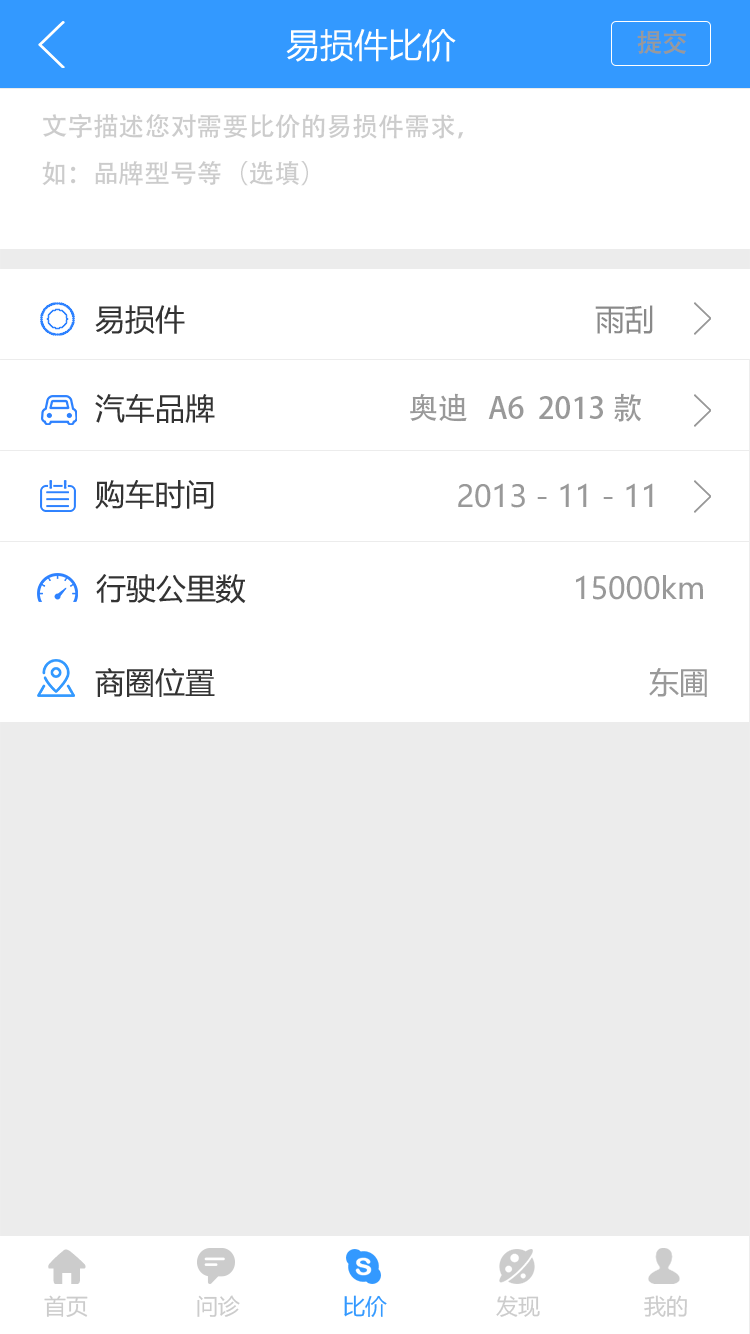
<style>
.page{position:relative;width:750px;height:1334px;background:#ffffff}
.page>*{position:absolute;margin:0}
.t1{font:34px "MicrosoftYaHei";color:#ffffff}
.t2{font:26px "AdobeHeitiStd-Regular";letter-spacing:-0.04em;color:#999999}
.t3{font:26px/47px "AdobeHeitiStd-Regular";color:#cccccc}
.t4{font:30px "MicrosoftYaHei";color:#333333}
.t5{font:30px "MicrosoftYaHei";color:#898989}
.t6{font:30px "AdobeHeitiStd-Regular";color:#999999}
.t7{font:30px "MicrosoftYaHei";color:#999999}
.t8{font:22px "MicrosoftYaHei";color:#cccccc}
.t9{font:22px "MicrosoftYaHei";color:#3399ff}
</style>
<div class="page">
<p class="t1" style="left:286px;top:28px;width:170px;height:34px">易损件比价</p>
<p class="t2" style="left:637px;top:29px;width:49px;height:25px">提交</p>
<p class="t3" style="left:42px;top:113px;width:421px;height:73px">文字描述您对需要比价的易损件需求，<br>如：品牌型号等（选填）</p>
<p class="t4" style="left:95px;top:305px;width:90px;height:30px">易损件</p>
<p class="t5" style="left:595px;top:305px;width:58px;height:29px">雨刮</p>
<p class="t4" style="left:95px;top:394px;width:120px;height:29px">汽车品牌</p>
<p class="t6" style="left:410px;top:393px;width:231px;height:29px">奥迪   A6  2013款</p>
<p class="t4" style="left:95px;top:480px;width:119px;height:29px">购车时间</p>
<p class="t7" style="left:458px;top:483px;width:195px;height:25px">2013 - 11 - 11</p>
<p class="t4" style="left:96px;top:574px;width:150px;height:30px">行驶公里数</p>
<p class="t7" style="left:576px;top:575px;width:127px;height:25px">15000km</p>
<p class="t4" style="left:95px;top:668px;width:120px;height:29px">商圈位置</p>
<p class="t7" style="left:649px;top:668px;width:58px;height:29px">东圃</p>
<p class="t8" style="left:44px;top:1295px;width:44px;height:22px">首页</p>
<p class="t8" style="left:197px;top:1295px;width:43px;height:22px">问诊</p>
<p class="t9" style="left:344px;top:1295px;width:43px;height:22px">比价</p>
<p class="t8" style="left:496px;top:1295px;width:44px;height:22px">发现</p>
<p class="t8" style="left:644px;top:1295px;width:43px;height:22px">我的</p>
</div>
